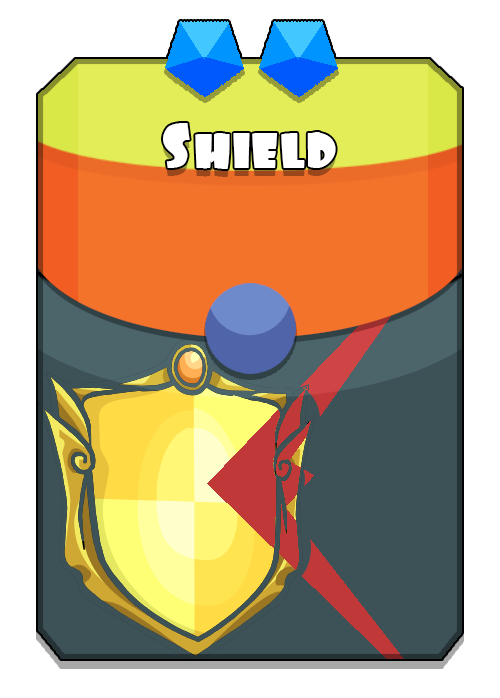
<style>
.page{position:relative;width:500px;height:698px;background:#ffffff}
.page>*{position:absolute;margin:0}
.t1{font:56px "Foo";color:#ffffff}
</style>
<div class="page">
<p class="t1" style="left:163px;top:123px;width:173px;height:46px">Shield</p>
</div>
